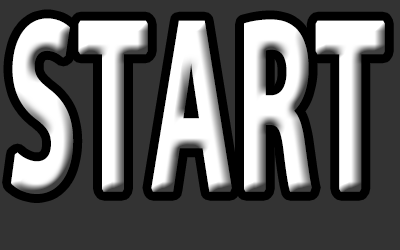
<style>
.page{position:relative;width:400px;height:250px;background:#333333}
.page>*{position:absolute;margin:0}
.t1{font:214.6px "AdobeGothicStd-Bold";color:#ffffff;font-weight:bold;scale:0.58 1}
</style>
<div class="page">
<p class="t1" style="left:11px;top:18px;width:374px;height:176px">START</p>
</div>
